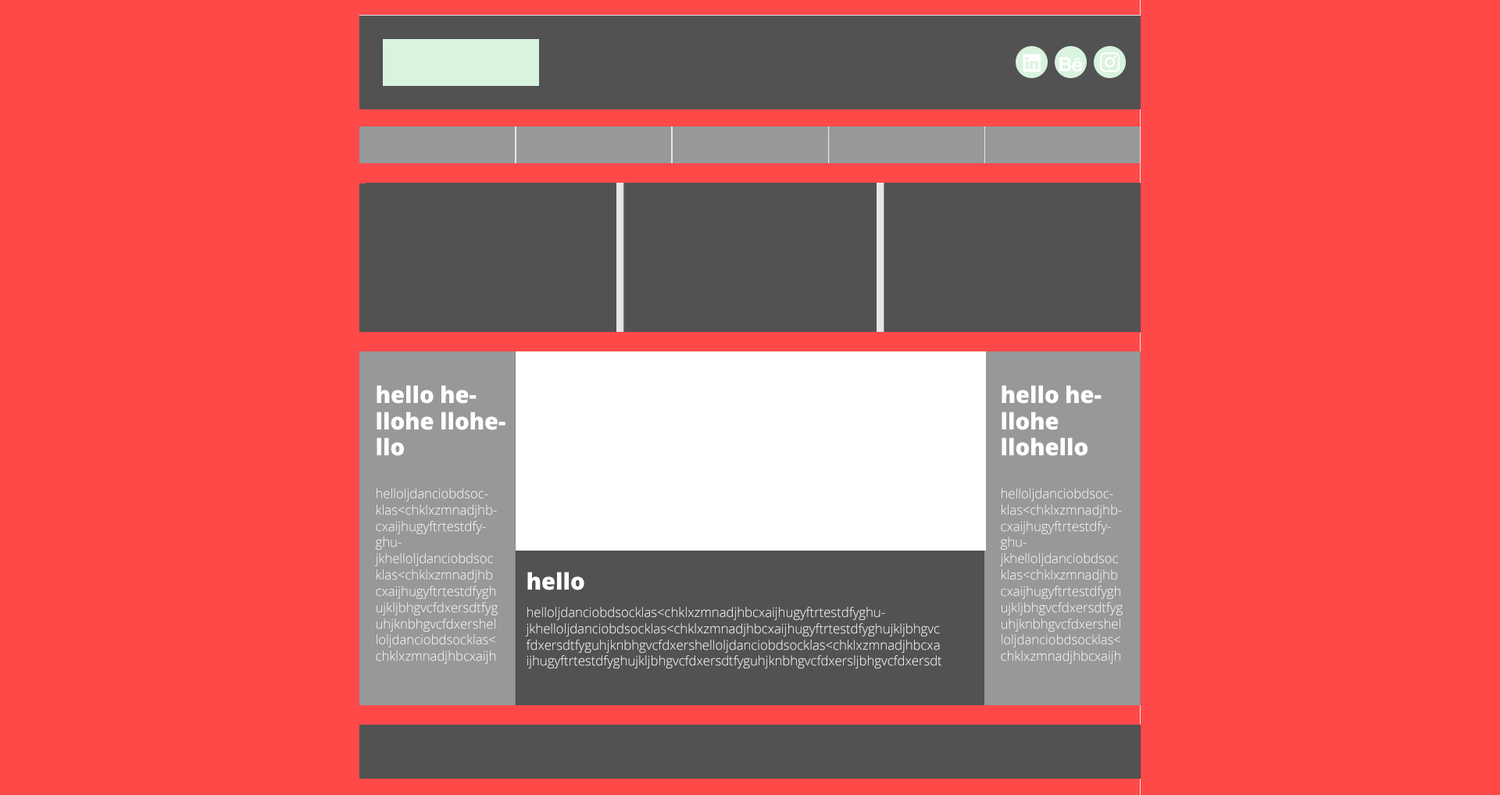
<style>
.page{position:relative;width:1500px;height:795px;background:#ff4949}
.page>*{position:absolute;margin:0}
.t1{font:22.8px/26px "OpenSans-ExtraBold";color:#ffffff}
.t2{font:13px/16.3px "OpenSans-Light";color:#ffffff}
.t3{font:22.8px "OpenSans-ExtraBold";color:#ffffff}
</style>
<div class="page">
<p class="t1" style="left:376px;top:385px;width:129px;height:71px">hello hellohe llohello</p>
<p class="t1" style="left:1001px;top:385px;width:100px;height:71px">hello hellohe llohello</p>
<p class="t2" style="left:374px;top:488px;width:124px;height:176px">helloljdanciobdsocklas&lt;chklxzmnadjhbcxaijhugyftrtestdfyghujkhelloljdanciobdsocklas&lt;chklxzmnadjhbcxaijhugyftrtestdfyghujkljbhgvcfdxersdtfyguhjknbhgvcfdxershelloljdanciobdsocklas&lt;chklxzmnadjhbcxaijhugyftrtestdfyghujkljbhgvcfdxersdtfyguhjknbhgvcfdxersljbhgvcfdxersdtfyguhjknbhgvcfdxers</p>
<p class="t2" style="left:999px;top:488px;width:123px;height:176px">helloljdanciobdsocklas&lt;chklxzmnadjhbcxaijhugyftrtestdfyghujkhelloljdanciobdsocklas&lt;chklxzmnadjhbcxaijhugyftrtestdfyghujkljbhgvcfdxersdtfyguhjknbhgvcfdxershelloljdanciobdsocklas&lt;chklxzmnadjhbcxaijhugyftrtestdfyghujkljbhgvcfdxersdtfyguhjknbhgvcfdxersljbhgvcfdxersdtfyguhjknbhgvcfdxers</p>
<p class="t3" style="left:527px;top:572px;width:57px;height:18px">hello</p>
<p class="t2" style="left:525px;top:607px;width:416px;height:62px">helloljdanciobdsocklas&lt;chklxzmnadjhbcxaijhugyftrtestdfyghujkhelloljdanciobdsocklas&lt;chklxzmnadjhbcxaijhugyftrtestdfyghujkljbhgvcfdxersdtfyguhjknbhgvcfdxershelloljdanciobdsocklas&lt;chklxzmnadjhbcxaijhugyftrtestdfyghujkljbhgvcfdxersdtfyguhjknbhgvcfdxersljbhgvcfdxersdtfyguhjknbhgvcfdxers</p>
</div>
